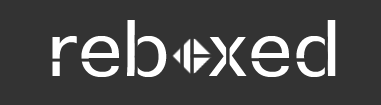
<style>
.page{position:relative;width:381px;height:105px;background:#333333}
.page>*{position:absolute;margin:0}
.t1{font:100px "AppleSymbols";color:#ffffff;scale:1.1 1}
</style>
<div class="page">
<p class="t1" style="left:52px;top:20px;width:284px;height:57px">reb xed</p>
</div>
